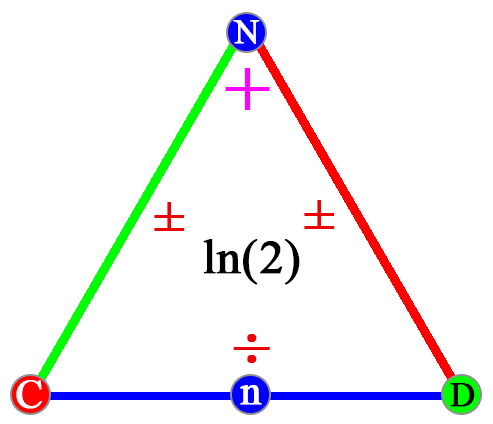
<style>
.page{position:relative;width:493px;height:424px;background:#ffffff}
.page>*{position:absolute;margin:0}
.t1{font:33.9px "TimesNewRomanPSMT";color:#ffffff;font-weight:bold}
.t2{font:79.6px "TimesNewRomanPSMT";color:#ff00ff;font-weight:bold}
.t3{font:54.2px "TimesNewRomanPSMT";letter-spacing:0.04em;color:#e90505;font-weight:bold}
.t4{font:47.9px "TimesNewRomanPSMT";color:#000000;font-weight:bold}
.t5{font:80.4px "BaskOldFace";letter-spacing:0.04em;color:#e90505;font-weight:bold}
.t6{font:41.3px "TimesNewRomanPSMT";color:#ffffff;font-weight:bold}
.t7{font:34.2px "TimesNewRomanPSMT";color:#000000;font-weight:bold}
</style>
<div class="page">
<p class="t1" style="left:233px;top:20px;width:27px;height:24px">N</p>
<p class="t2" style="left:225px;top:68px;width:45px;height:42px">+</p>
<p class="t3" style="left:154px;top:202px;width:31px;height:29px">±</p>
<p class="t3" style="left:304px;top:200px;width:31px;height:29px">±</p>
<p class="t4" style="left:203px;top:239px;width:97px;height:46px">ln(2)</p>
<p class="t5" style="left:233px;top:334px;width:37px;height:29px">÷</p>
<p class="t6" style="left:16px;top:380px;width:26px;height:29px">C</p>
<p class="t6" style="left:240px;top:385px;width:22px;height:20px">n</p>
<p class="t7" style="left:450px;top:383px;width:25px;height:24px">D</p>
</div>
